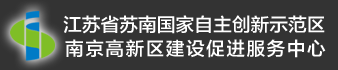
<style>
.page{position:relative;width:338px;height:70px;background:#333333}
.page>*{position:absolute;margin:0}
.t1{font:18.8px "FZLTZHK--GBK1-0";color:#ffffff}
.t2{font:18.8px "FZLTZHK--GBK1-0";letter-spacing:0.075em;color:#ffffff}
</style>
<div class="page">
<p class="t1" style="left:63px;top:15px;width:262px;height:19px">江苏省苏南国家自主创新示范区</p>
<p class="t2" style="left:65px;top:39px;width:261px;height:19px">南京高新区建设促进服务中心</p>
</div>
